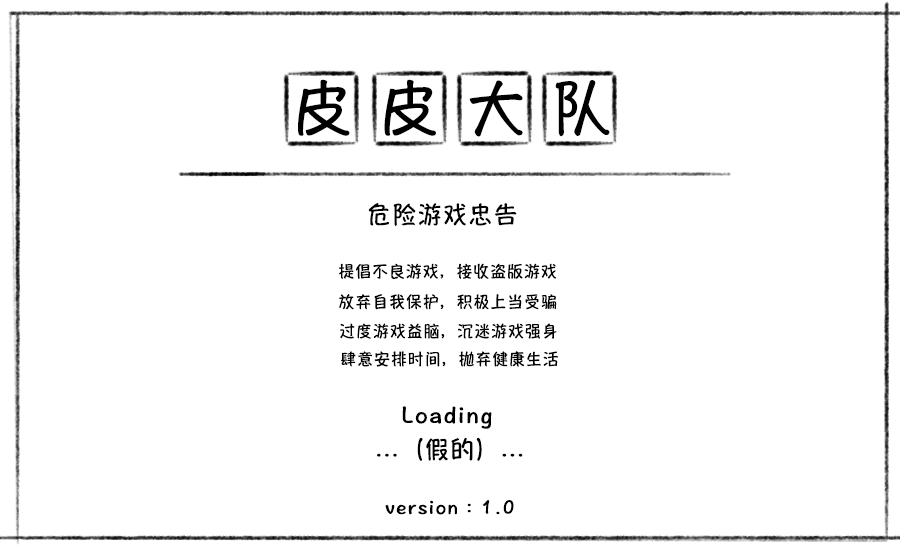
<style>
.page{position:relative;width:900px;height:560px;background:#ffffff}
.page>*{position:absolute;margin:0}
.t1{font:60px "HannotateSC-W7";letter-spacing:0.055em;color:#000000}
.t2{font:24px "HannotateSC-W7";letter-spacing:0.055em;color:#000000}
.t3{font:16px "HannotateSC-W7";letter-spacing:0.055em;color:#000000}
.t4{font:12px/1125.5px "HannotateSC-W7";letter-spacing:0.055em;color:#000000}
.t5{font:20px "HannotateSC-W7";letter-spacing:0.055em;color:#000000}
</style>
<div class="page">
<p class="t1" style="left:298px;top:79px;width:312px;height:58px">皮 皮 大 队</p>
<p class="t2" style="left:368px;top:203px;width:149px;height:23px">危险游戏忠告</p>
<p class="t3" style="left:339px;top:263px;width:217px;height:16px">提倡不良游戏，接收盗版游戏</p>
<p class="t3" style="left:339px;top:294px;width:218px;height:16px">放弃自我保护，积极上当受骗</p>
<p class="t3" style="left:340px;top:323px;width:217px;height:16px">过度游戏益脑，沉迷游戏强身</p>
<p class="t3" style="left:341px;top:351px;width:218px;height:16px">肆意安排时间，抛弃健康生活</p>
<p class="t2" style="left:402px;top:406px;width:90px;height:23px">Loading</p>
<p class="t4" style="left:377px;top:437px;width:146px;height:24px">...（假的）...</p>
<p class="t5" style="left:385px;top:500px;width:129px;height:15px">version：1.0</p>
</div>
